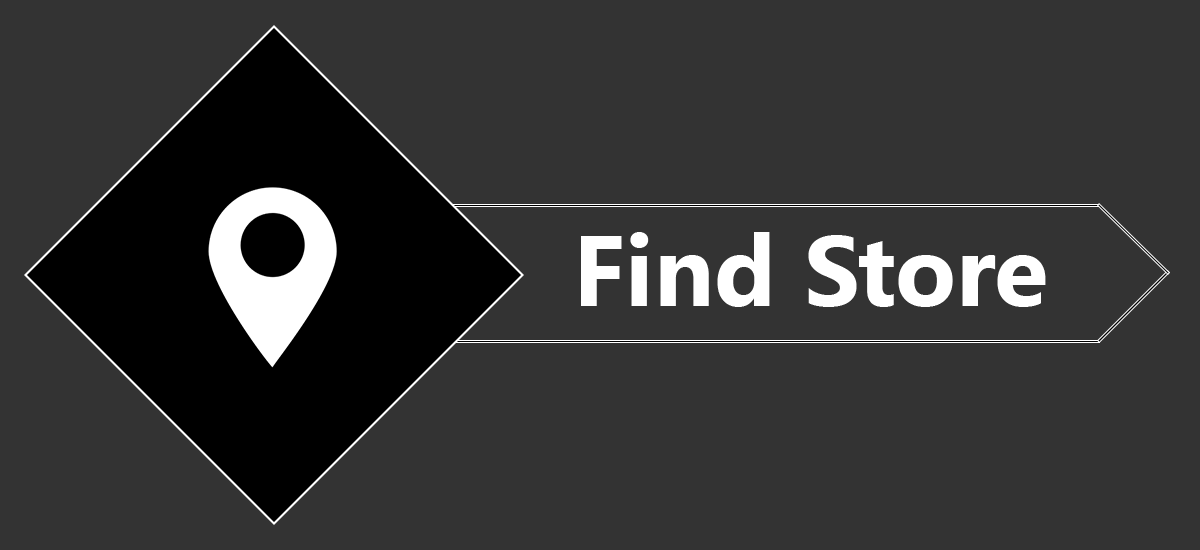
<style>
.page{position:relative;width:1200px;height:550px;background:#333333}
.page>*{position:absolute;margin:0}
.t1{font:100px "KhmerUI-Bold";color:#ffffff}
</style>
<div class="page">
<p class="t1" style="left:581px;top:232px;width:465px;height:75px">Find Store</p>
</div>
